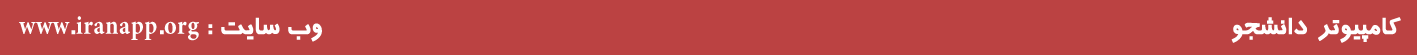
<style>
.page{position:relative;width:1417px;height:55px;background:#bb4242}
.page>*{position:absolute;margin:0}
.t1{font:26.6px "BTrafficBold";letter-spacing:0.02em;color:#ffffff;font-weight:bold;scale:0.9 1}
</style>
<div class="page">
<p class="t1" style="left:19px;top:16px;width:303px;height:26px">وب سایت : www.iranapp.org</p>
<p class="t1" style="left:1231px;top:17px;width:170px;height:26px">کامپیوتر دانشجو</p>
</div>
